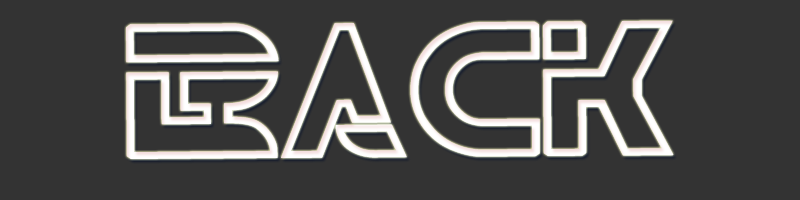
<style>
.page{position:relative;width:800px;height:200px;background:#333333}
.page>*{position:absolute;margin:0}
.t1{font:191.7px "TRN";color:#ffffff;scale:1.08 1}
</style>
<div class="page">
<p class="t1" style="left:126px;top:20px;width:548px;height:139px">Back</p>
</div>
